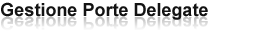
<style>
.page{position:relative;width:257px;height:31px;background:#ffffff}
.page>*{position:absolute;margin:0}
.t1{font:18px "Arial-BoldMT";color:#131313}
</style>
<div class="page">
<p class="t1" style="left:1px;top:2px;width:207px;height:18px">Gestione Porte Delegate</p>
</div>
